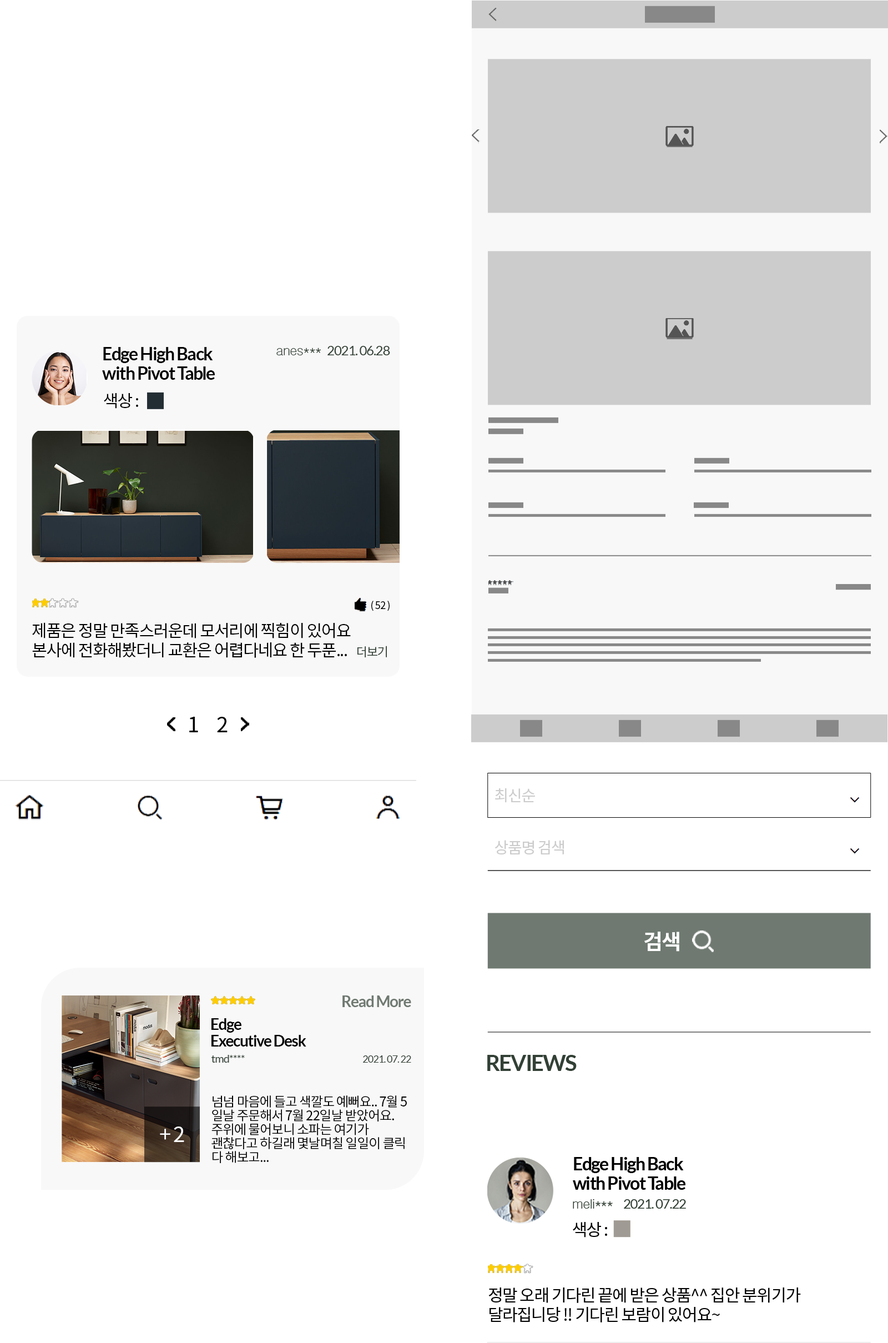
<style>
.page{position:relative;width:888px;height:1343px;background:#ffffff}
.page>*{position:absolute;margin:0}
.t1{font:17.8px/19.4px "Lato-Bold";letter-spacing:-0.05em;color:#000000}
.t2{font:13.3px "Gulim";letter-spacing:-0.05em;color:#324035}
.t3{font:13.3px "Lato-Regular";letter-spacing:-0.05em;color:#324035}
.t4{font:16.7px "NotoSansCJKkr-Regular";letter-spacing:-0.05em;color:#000000}
.t5{font:9.9px "NotoSansCJKkr-Regular";letter-spacing:-0.05em;color:#000000}
.t6{font:16.7px/19.4px "NotoSansCJKkr-Regular";letter-spacing:-0.05em;color:#000000}
.t7{font:12.2px/19.4px "NotoSansCJKkr-Regular";letter-spacing:-0.05em;color:#324035}
.t8{font:21.1px "NotoSansCJKkr-Regular";letter-spacing:-0.05em;color:#000000}
.t9{font:15.5px "NotoSansCJKkr-Regular";letter-spacing:-0.05em;color:#cccccc}
.t10{font:21.1px "NotoSansCJKkr-Bold";letter-spacing:-0.05em;color:#ffffff}
.t11{font:15.5px "Lato-Bold";letter-spacing:-0.05em;color:#6f7971}
.t12{font:15.5px/16.7px "Lato-Bold";letter-spacing:-0.05em;color:#000000}
.t13{font:11.1px "Lato-Regular";letter-spacing:-0.05em;color:#324035}
.t14{font:10px "Lato-Regular";letter-spacing:-0.05em;color:#324035}
.t15{font:22.2px "Lato-Bold";letter-spacing:-0.05em;color:#324035}
.t16{font:13.3px/13.9px "NotoSansCJKkr-Regular";letter-spacing:-0.05em;color:#000000}
.t17{font:21.1px "NotoSansCJKkr-Regular";letter-spacing:-0.05em;color:#ffffff}
</style>
<div class="page">
<p class="t1" style="left:102px;top:347px;width:113px;height:33px;text-align:center">Edge High Back <br>with Pivot Table</p>
<p class="t2" style="left:276px;top:347px;width:45px;height:8px">anes***</p>
<p class="t3" style="left:327px;top:346px;width:63px;height:9px">2021. 06.28</p>
<p class="t4" style="left:104px;top:393px;width:34px;height:16px">색상 :</p>
<p class="t5" style="left:371px;top:601px;width:19px;height:10px">( 52 )</p>
<p class="t6" style="left:32px;top:622px;width:355px;height:36px">제품은 정말 만족스러운데 모서리에 찍힘이 있어요 본사에 전화해봤더니 교환은 어렵다네요 한 두푼...   <span class="t7">더보기</span></p>
<p class="t8" style="left:189px;top:717px;width:39px;height:15px">1     2</p>
<p class="t9" style="left:495px;top:788px;width:40px;height:15px">최신순</p>
<p class="t9" style="left:495px;top:840px;width:69px;height:15px">상품명 검색</p>
<p class="t10" style="left:644px;top:931px;width:35px;height:20px">검색</p>
<p class="t11" style="left:342px;top:995px;width:69px;height:12px">Read More</p>
<p class="t12" style="left:211px;top:1018px;width:95px;height:28px">Edge<br> Executive Desk</p>
<p class="t13" style="left:211px;top:1055px;width:34px;height:7px">tmd****</p>
<p class="t14" style="left:363px;top:1055px;width:48px;height:7px">2021. 07. 22</p>
<p class="t15" style="left:487px;top:1055px;width:90px;height:16px">REVIEWS</p>
<p class="t16" style="left:211px;top:1095px;width:196px;height:68px">넘넘 마음에 들고 색깔도 예뻐요.. 7월 5일날 주문해서 7월 22일날 받았어요. 주위에 물어보니 소파는 여기가 괜찮다고 하길래 몇날며칠 일일이 클릭 다 해보고...</p>
<p class="t17" style="left:160px;top:1126px;width:24px;height:16px">+ 2</p>
<p class="t1" style="left:573px;top:1157px;width:112px;height:32px;text-align:center">Edge High Back <br>with Pivot Table</p>
<p class="t2" style="left:573px;top:1199px;width:40px;height:9px">meli***</p>
<p class="t3" style="left:624px;top:1199px;width:62px;height:9px">2021. 07.22</p>
<p class="t4" style="left:573px;top:1222px;width:34px;height:15px">색상 :</p>
<p class="t6" style="left:488px;top:1287px;width:313px;height:35px">정말 오래 기다린 끝에 받은 상품^^ 집안 분위기가 달라집니당 !! 기다린 보람이 있어요~</p>
</div>
